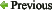
<style>
.page{position:relative;width:53px;height:11px;background:#ffffff}
.page>*{position:absolute;margin:0}
.t1{font:12px "TimesNewRomanPSMT";letter-spacing:-0.005em;color:#13180f}
</style>
<div class="page">
<p class="t1" style="left:10px;top:0px;width:42px;height:10px">Previous</p>
<p class="t1" style="left:10px;top:0px;width:42px;height:10px">Previous</p>
</div>
